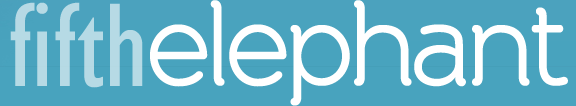
<style>
.page{position:relative;width:576px;height:106px;background:#48a3be}
.page>*{position:absolute;margin:0}
.t1{font:122.7px "GillSansMT-Condensed";color:#b6dae5}
.t2{font:116.7px "BandaRegular";letter-spacing:-0.075em;color:#ffffff}
</style>
<div class="page">
<p class="t1" style="left:10px;top:2px;width:133px;height:86px">fifth</p>
<p class="t2" style="left:150px;top:0px;width:418px;height:106px">elephant</p>
</div>
